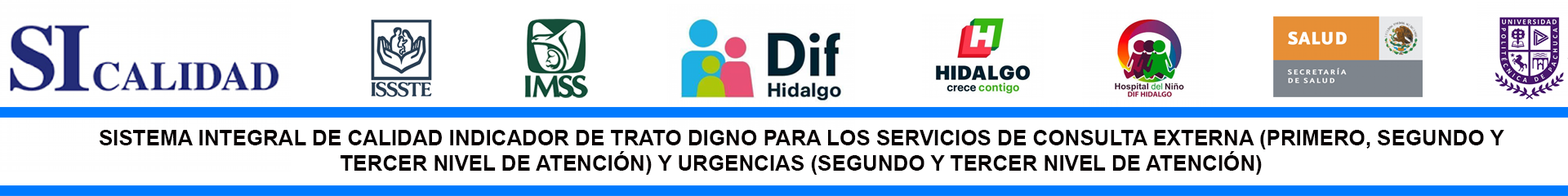
<style>
.page{position:relative;width:1568px;height:196px;background:#ffffff}
.page>*{position:absolute;margin:0}
.t1{font:21.2px "Arial-BoldMT";color:#070000}
</style>
<div class="page">
<p class="t1" style="left:99px;top:130px;width:1405px;height:45px;text-align:center">SISTEMA INTEGRAL DE CALIDAD INDICADOR DE TRATO DIGNO PARA LOS SERVICIOS DE CONSULTA EXTERNA (PRIMERO, SEGUNDO Y TERCER NIVEL DE ATENCIÓN) Y URGENCIAS (SEGUNDO Y TERCER NIVEL DE ATENCIÓN)</p>
</div>
